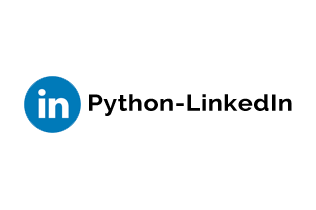
<style>
.page{position:relative;width:316px;height:210px;background:#ffffff}
.page>*{position:absolute;margin:0}
.t1{font:22.8px "Raleway-Bold";letter-spacing:0.02em;color:#000000;scale:1.1 1}
</style>
<div class="page">
<p class="t1" style="left:89px;top:94px;width:203px;height:22px">Python-LinkedIn</p>
</div>
